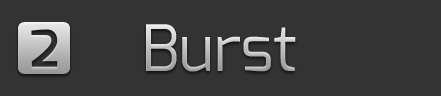
<style>
.page{position:relative;width:441px;height:96px;background:#333333}
.page>*{position:absolute;margin:0}
.t1{font:64px "Exo-Regular"}
</style>
<div class="page">
<p class="t1" style="left:146px;top:24px;width:150px;height:48px">Burst</p>
</div>
